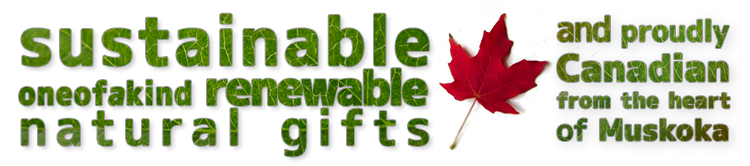
<style>
.page{position:relative;width:750px;height:166px;background:#ffffff}
.page>*{position:absolute;margin:0}
.t1{font:47.6px/40px "mplus-1c-medium";letter-spacing:0.18em;font-weight:bold;scale:1.03 1}
.t2{font:66.6px "mplus-1c-bold";letter-spacing:0.059em;font-weight:bold}
.t3{font:32.6px/40px "mplus-1c-heavy";letter-spacing:0.04em;font-weight:bold;scale:0.88 1}
.t4{font:32.6px/40px "mplus-1c-heavy";letter-spacing:0.04em;font-weight:bold;font-style:italic;scale:0.88 1}
.t5{font:47.6px/40px "mplus-1c-heavy";letter-spacing:-0.06em;font-weight:bold}
.t6{font:20.9px/26.7px "mplus-1c-heavy";font-weight:bold;scale:1.04 1}
.t7{font:34.3px/40px "mplus-1c-medium";letter-spacing:-0.06em;font-weight:bold}
.t8{font:28.6px/40px "mplus-1c-bold";font-weight:bold}
.t9{font:36.2px/40px "mplus-1c-heavy";font-weight:bold;scale:1.04 1}
.t10{font:28.6px/32.4px "mplus-1c-medium";font-weight:bold;scale:1.04 1}
.t11{font:28.6px/32.4px "mplus-1c-heavy";font-weight:bold;scale:1.04 1}
</style>
<div class="page">
<p class="t1" style="left:19px;top:13px;width:410px;height:144px"><span class="t2">sustainable<br></span><span class="t3">oneof</span><span class="t4">a</span><span class="t3">kind </span><span class="t5">renewable<br></span>natural gifts</p>
<p class="t6" style="left:557px;top:15px;width:173px;height:126px"><span class="t7">and </span><span class="t8">proudly<br></span><span class="t9">Canadian<br></span>from the heart<br><span class="t10">of </span><span class="t11">Muskoka</span></p>
</div>
